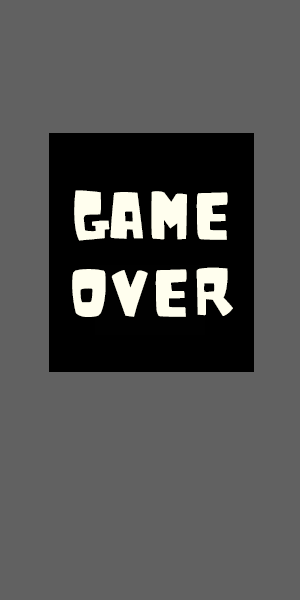
<style>
.page{position:relative;width:300px;height:600px;background:#616161}
.page>*{position:absolute;margin:0}
.t1{font:63.9px "Noot";color:#fffeee}
</style>
<div class="page">
<p class="t1" style="left:72px;top:190px;width:161px;height:127px;text-align:center">GAME<br>OVER</p>
</div>
